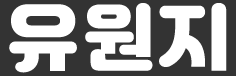
<style>
.page{position:relative;width:236px;height:76px;background:#ffffff}
.page>*{position:absolute;margin:0}
.t1{font:72px "Jalnan";letter-spacing:0.05em;color:#ffffff;text-transform:uppercase}
</style>
<div class="page">
<p class="t1" style="left:9px;top:3px;width:218px;height:70px">유원지</p>
</div>
